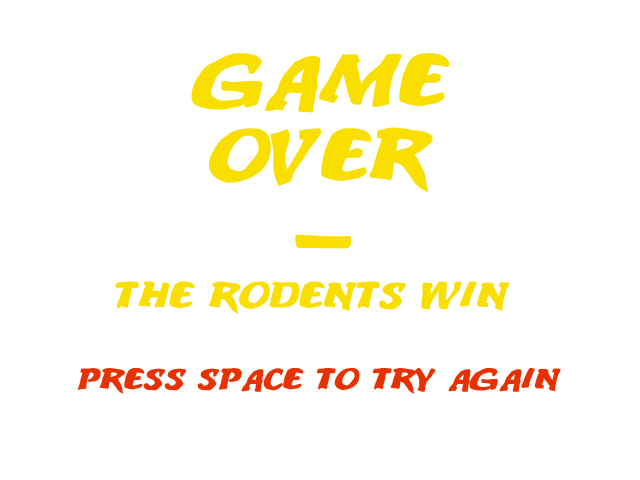
<style>
.page{position:relative;width:640px;height:480px;background:#ffffff}
.page>*{position:absolute;margin:0}
.t1{font:33.3px "Anodetonoone";color:#e83100}
.t2{font:83.3px/75px "Anodetonoone";color:#f8df00}
.t3{font:41.7px/45.8px "Anodetonoone";color:#f8df00}
</style>
<div class="page">
<p class="t1" style="left:77px;top:53px;width:484px;height:341px;text-align:center"><span class="t2">GAME<br>OVER<br>-<br></span><span class="t3">The rodents WIN <br></span><br>Press space to TRY AGAIN</p>
</div>
